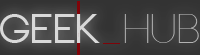
<style>
.page{position:relative;width:200px;height:55px}
.page>*{position:absolute;margin:0}
.t1{font:41px "Neou-Bold";color:#d9d9d9}
.t2{font:41px "Neou-Thin";color:#800409}
.t3{font:41px "Neou-Thin";color:#b2b2b2}
</style>
<div class="page">
<p class="t1" style="left:0px;top:14px;width:199px;height:30px">Geek<span class="t2">_</span><span class="t3">Hub</span></p>
</div>
